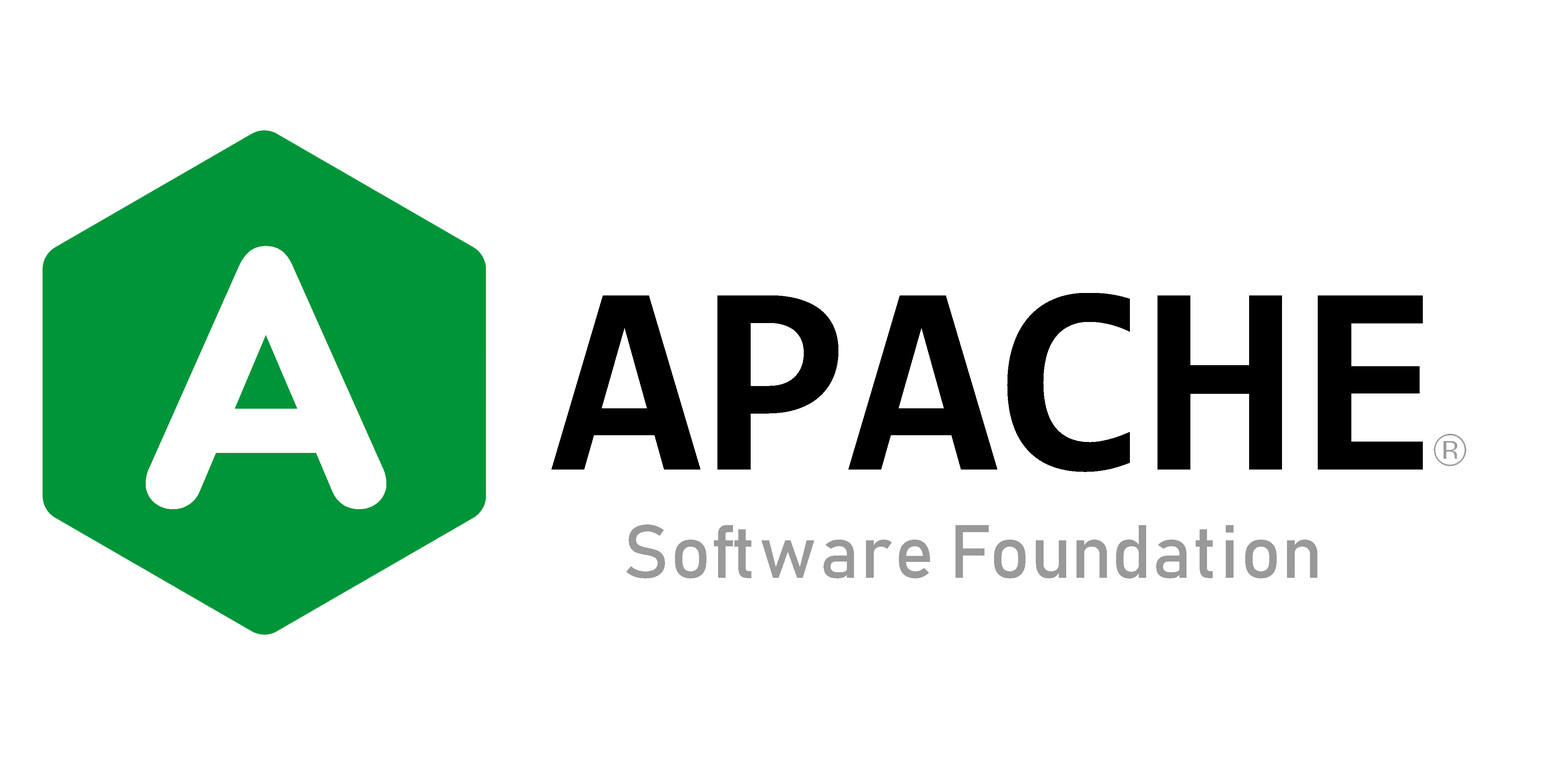
<style>
.page{position:relative;width:1559px;height:765px;background:#ffffff}
.page>*{position:absolute;margin:0}
.t1{font:370.7px "VisbyRoundCF-ExtraBold";color:#ffffff}
.t2{font:272.1px "Consolas-Bold";color:#000000}
.t3{font:74.2px "Bahnschrift";color:#999999}
</style>
<div class="page">
<p class="t1" style="left:146px;top:246px;width:240px;height:263px">A</p>
<p class="t2" style="left:552px;top:293px;width:871px;height:179px">APACHE</p>
<p class="t3" style="left:627px;top:524px;width:690px;height:54px">Software Foundation</p>
</div>
